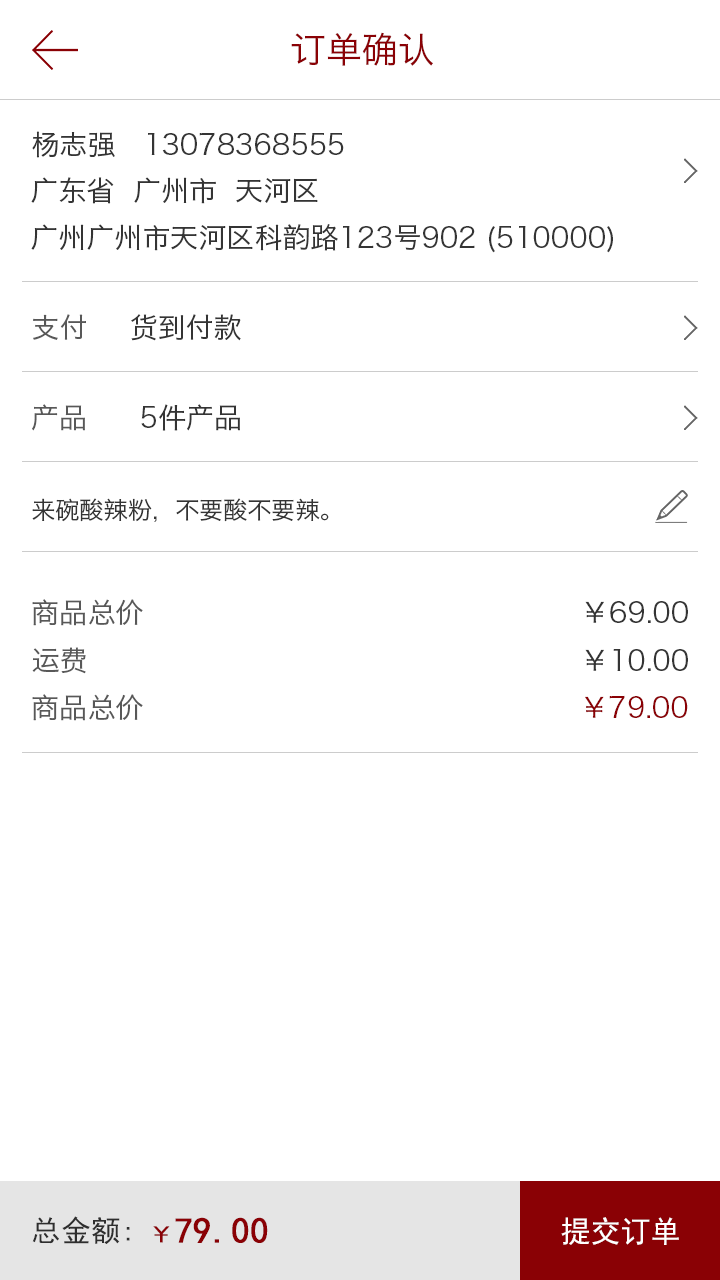
<style>
.page{position:relative;width:720px;height:1280px;background:#ffffff}
.page>*{position:absolute;margin:0}
.t1{font:36px "HiraginoSansGB-W3";color:#8a0105}
.t2{font:28px "HiraginoSansGB-W3";color:#343434}
.t3{font:28px "HiraginoSansGB-W3";color:#585858}
.t4{font:24px "HiraginoSansGB-W3";color:#343434}
.t5{font:28px "HiraginoSansGB-W3";color:#8a0105}
.t6{font:30px "SimHei";color:#2e2e2e}
.t7{font:36px "SimHei";color:#8a0105;font-weight:bold}
.t8{font:24px "SimHei";color:#8a0105;font-weight:bold}
.t9{font:30px "SimHei";color:#ffffff}
</style>
<div class="page">
<p class="t1" style="left:291px;top:32px;width:142px;height:34px">订单确认</p>
<p class="t2" style="left:32px;top:131px;width:312px;height:27px">杨志强   13078368555</p>
<p class="t2" style="left:31px;top:177px;width:287px;height:27px">广东省  广州市  天河区</p>
<p class="t2" style="left:31px;top:224px;width:582px;height:29px">广州广州市天河区科韵路123号902 (510000)</p>
<p class="t3" style="left:33px;top:314px;width:53px;height:26px">支付</p>
<p class="t2" style="left:131px;top:314px;width:110px;height:27px">货到付款</p>
<p class="t3" style="left:32px;top:404px;width:53px;height:27px">产品</p>
<p class="t2" style="left:141px;top:404px;width:99px;height:27px">5件产品</p>
<p class="t4" style="left:32px;top:498px;width:297px;height:24px">来碗酸辣粉，不要酸不要辣。</p>
<p class="t3" style="left:32px;top:599px;width:111px;height:27px">商品总价</p>
<p class="t2" style="left:585px;top:601px;width:103px;height:22px">￥69.00</p>
<p class="t3" style="left:32px;top:647px;width:54px;height:27px">运费</p>
<p class="t2" style="left:585px;top:649px;width:103px;height:22px">￥10.00</p>
<p class="t3" style="left:32px;top:694px;width:111px;height:27px">商品总价</p>
<p class="t5" style="left:585px;top:695px;width:103px;height:23px">￥79.00</p>
<p class="t6" style="left:32px;top:1216px;width:98px;height:28px">总金额:</p>
<p class="t7" style="left:153px;top:1217px;width:115px;height:26px"><span class="t8">￥</span>79.00</p>
<p class="t9" style="left:561px;top:1217px;width:118px;height:28px">提交订单</p>
</div>
